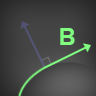
<style>
.page{position:relative;width:96px;height:96px}
.page>*{position:absolute;margin:0}
.t1{font:24px "Arial-BoldMT";color:#80ff80}
</style>
<div class="page">
<p class="t1" style="left:60px;top:28px;width:15px;height:17px">B</p>
</div>
